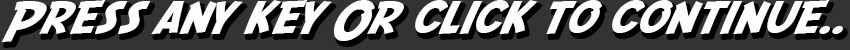
<style>
.page{position:relative;width:850px;height:50px;background:#333333}
.page>*{position:absolute;margin:0}
.t1{font:46.1px "SFFedora";letter-spacing:-0.005em;color:#fdfdfd;scale:1.05 1}
</style>
<div class="page">
<p class="t1" style="left:1px;top:0px;width:842px;height:42px">Press any key Or click to continue..</p>
</div>
